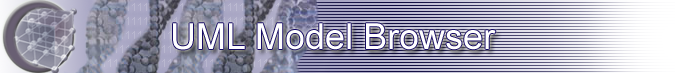
<style>
.page{position:relative;width:675px;height:73px}
.page>*{position:absolute;margin:0}
.t1{font:36px "ArialMT";color:#ffffff}
</style>
<div class="page">
<p class="t1" style="left:173px;top:23px;width:323px;height:27px">UML Model Browser</p>
</div>
